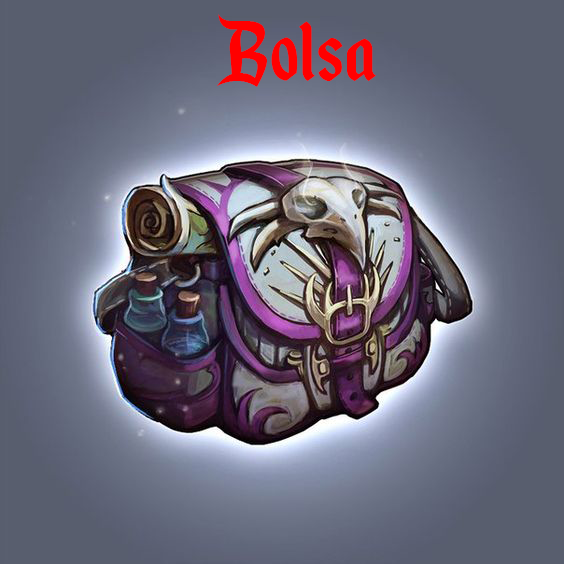
<style>
.page{position:relative;width:564px;height:564px}
.page>*{position:absolute;margin:0}
.t1{font:100px "EnchantedLand";color:#ff0000}
</style>
<div class="page">
<p class="t1" style="left:217px;top:14px;width:159px;height:73px">Bolsa</p>
</div>
